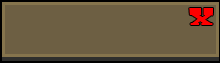
<style>
.page{position:relative;width:220px;height:63px;background:#6d5f43}
.page>*{position:absolute;margin:0}
.t1{font:26px "Bigfish-Black";color:#ff0000}
</style>
<div class="page">
<p class="t1" style="left:189px;top:8px;width:24px;height:17px">X</p>
</div>
